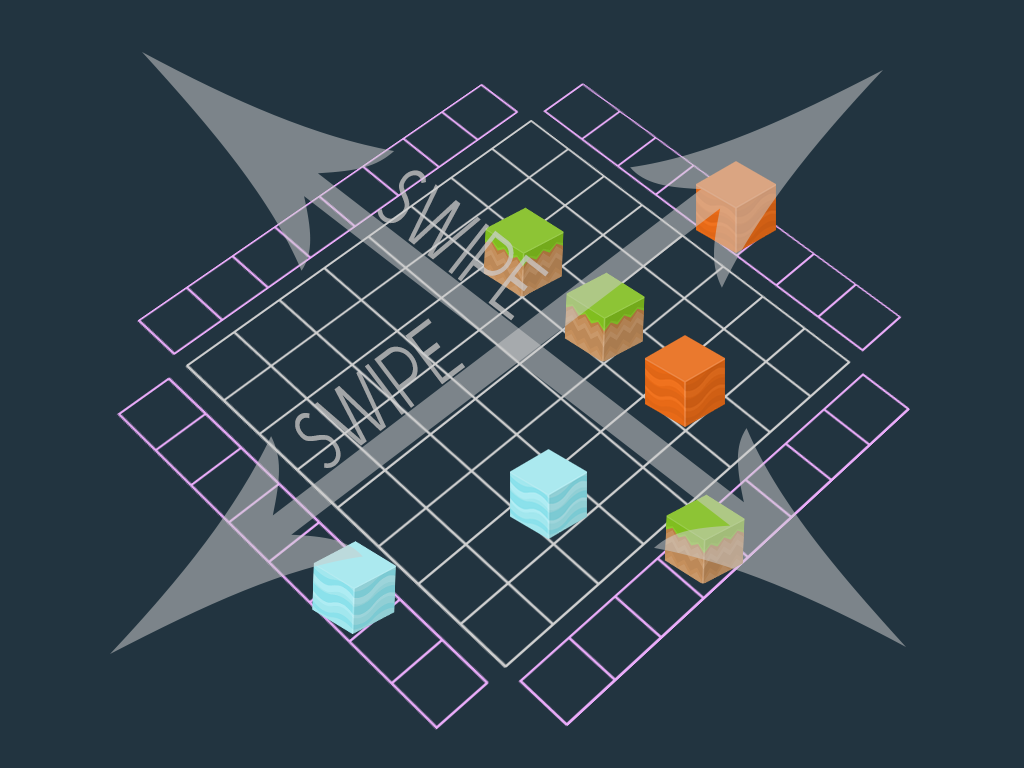
<style>
.page{position:relative;width:1024px;height:768px;background:#223440}
.page>*{position:absolute;margin:0}
.t1{font:72px "Y2KNeophyte";letter-spacing:0.05em;scale:0.8 1}
.t2{font:72px "Y2KNeophyte";letter-spacing:0.05em;color:#a2a5a7;scale:0.8 1}
</style>
<div class="page">
<p class="t1" style="left:377px;top:170px;width:172px;height:151px;rotate:38deg">SWIPE</p>
<p class="t2" style="left:295px;top:318px;width:170px;height:150px;rotate:-37deg">SWIPE</p>
</div>
